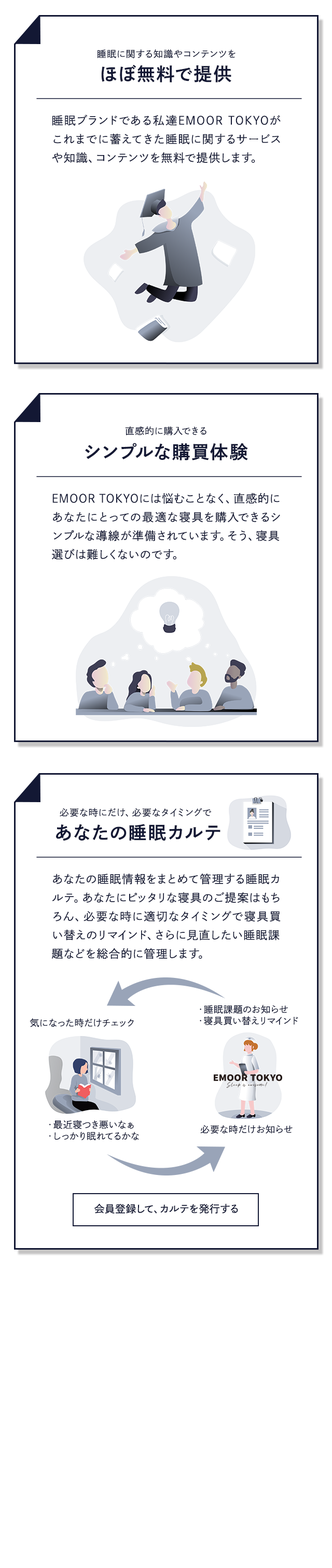
<style>
.page{position:relative;width:332px;height:1568px;background:#ffffff}
.page>*{position:absolute;margin:0}
.t1{font:9.3px "DNPShueiGoGinStd-L";letter-spacing:0.05em;color:#131834}
.t2{font:18.1px "DNPShueiGoGinStd-B";letter-spacing:0.075em;color:#131834}
.t3{font:11.4px/18.7px "DNPShueiGoGinStd-L";letter-spacing:0.05em;color:#131834}
.t4{font:9.3px/11.4px "DNPShueiGoGinStd-L";letter-spacing:0.025em;color:#131834}
.t5{font:9.3px "DNPShueiGoGinStd-L";letter-spacing:0.025em;color:#131834}
.t6{font:10.4px "DNPShueiGoGinStd-M";letter-spacing:0.01em;color:#131834}
</style>
<div class="page">
<p class="t1" style="left:97px;top:49px;width:138px;height:10px">睡眠に関する知識やコンテンツを</p>
<p class="t2" style="left:101px;top:65px;width:130px;height:17px">ほぼ無料で提供</p>
<p class="t3" style="left:52px;top:115px;width:229px;height:48px;text-align:justify">睡眠ブランドである私達EMOORTOKYOがこれまでに蓄えてきた睡眠に関するサービスや知識、コンテンツを無料で提供します。</p>
<p class="t1" style="left:125px;top:426px;width:81px;height:10px">直感的に購入できる</p>
<p class="t2" style="left:85px;top:443px;width:163px;height:17px">シンプルな購買体験</p>
<p class="t3" style="left:52px;top:493px;width:228px;height:67px;text-align:justify">EMOORTOKYOには悩むことなく、直感的にあなたにとっての最適な寝具を購入できるシンプルな導線が準備されています。そう、寝具選びは難しくないのです。</p>
<p class="t1" style="left:60px;top:808px;width:152px;height:9px">必要な時にだけ、必要なタイミングで</p>
<p class="t2" style="left:56px;top:824px;width:164px;height:17px">あなたの睡眠カルテ</p>
<p class="t3" style="left:51px;top:873px;width:230px;height:86px;text-align:justify">あなたの睡眠情報をまとめて管理する睡眠カルテ。あなたにピッタリな寝具のご提案はもちろん、必要な時に適切なタイミングで寝具買い替えのリマインド、さらに見直したい睡眠課題などを総合的に管理します。</p>
<p class="t4" style="left:200px;top:1005px;width:98px;height:20px;text-align:justify">・睡眠課題のお知らせ<br>・寝具買い替えリマインド</p>
<p class="t5" style="left:30px;top:1018px;width:104px;height:9px">気になった時だけチェック</p>
<p class="t4" style="left:49px;top:1120px;width:90px;height:20px;text-align:justify">・最近寝つき悪いなぁ<br>・しっかり眠れてるかな</p>
<p class="t5" style="left:200px;top:1125px;width:92px;height:9px">必要な時だけお知らせ</p>
<p class="t6" style="left:94px;top:1203px;width:144px;height:11px">会員登録して、カルテを発行する</p>
</div>
